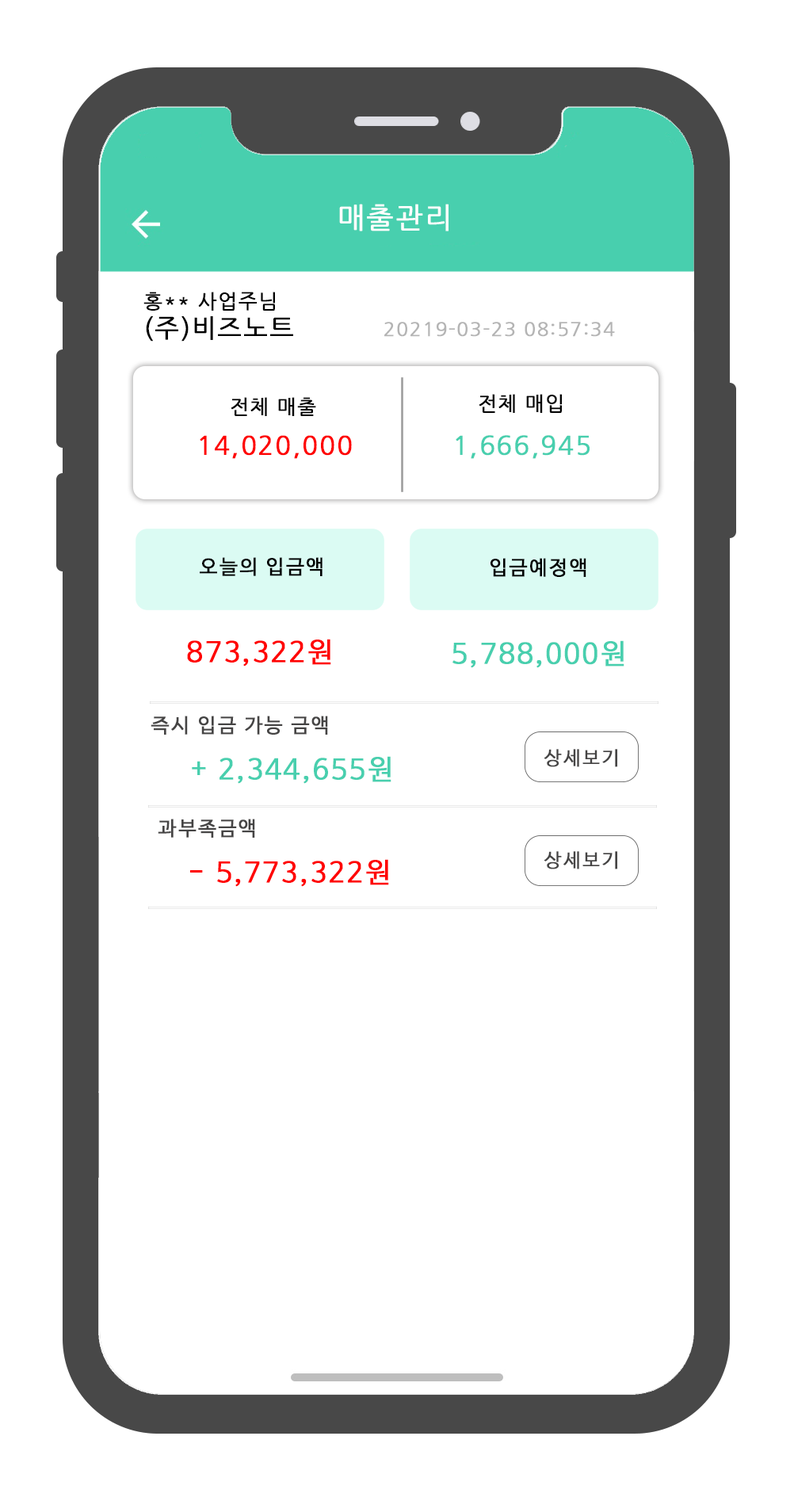
<style>
.page{position:relative;width:794px;height:1501px;background:#ffffff}
.page>*{position:absolute;margin:0}
.t1{font:28.5px "NanumGothic";letter-spacing:0.05em;color:#fefefe;font-weight:bold}
.t2{font:19.8px/28.5px "NanumGothic";letter-spacing:0.05em;color:#000000;font-weight:bold}
.t3{font:25.4px/28.5px "NanumGothic";letter-spacing:0.05em;color:#000000;font-weight:bold}
.t4{font:19px "NanumGothic";letter-spacing:0.05em;color:#b4b4b4;font-weight:bold}
.t5{font:19.8px "NanumGothic";letter-spacing:0.05em;color:#000000;font-weight:bold}
.t6{font:25.4px "NanumGothic";letter-spacing:0.05em;color:#fe0000;font-weight:bold}
.t7{font:25.4px "NanumGothic";letter-spacing:0.05em;color:#48cfae;font-weight:bold}
.t8{font:19.8px "HancomGothicRegular";letter-spacing:0.05em;color:#000000;font-weight:bold}
.t9{font:27.7px "HancomGothicRegular";letter-spacing:0.05em;color:#ff0000;font-weight:bold}
.t10{font:27.7px "HancomGothicRegular";letter-spacing:0.05em;color:#48cfae;font-weight:bold}
.t11{font:19.8px "HancomGothicRegular";letter-spacing:0.05em;color:#454444;font-weight:bold}
.t12{font:19px "HancomGothicRegular";letter-spacing:0.05em;color:#454444;font-weight:bold}
</style>
<div class="page">
<p class="t1" style="left:339px;top:204px;width:110px;height:27px">매출관리</p>
<p class="t2" style="left:143px;top:292px;width:150px;height:50px">홍** 사업주님 <br><span class="t3">(주)비즈노트</span></p>
<p class="t4" style="left:384px;top:322px;width:231px;height:15px">20219-03-23 08:57:34</p>
<p class="t5" style="left:231px;top:397px;width:85px;height:19px">전체 매출</p>
<p class="t5" style="left:479px;top:394px;width:83px;height:19px">전체 매입</p>
<p class="t6" style="left:200px;top:435px;width:152px;height:24px">14,020,000</p>
<p class="t7" style="left:456px;top:435px;width:134px;height:24px">1,666,945</p>
<p class="t8" style="left:200px;top:557px;width:123px;height:19px">오늘의 입금액</p>
<p class="t8" style="left:491px;top:558px;width:96px;height:19px">입금예정액</p>
<p class="t9" style="left:187px;top:639px;width:144px;height:28px">873,322원</p>
<p class="t10" style="left:453px;top:640px;width:172px;height:28px">5,788,000원</p>
<p class="t11" style="left:151px;top:716px;width:177px;height:19px">즉시 입금 가능 금액</p>
<p class="t12" style="left:544px;top:749px;width:73px;height:18px">상세보기</p>
<p class="t10" style="left:192px;top:756px;width:200px;height:28px">+ 2,344,655원</p>
<p class="t11" style="left:158px;top:819px;width:97px;height:19px">과부족금액</p>
<p class="t12" style="left:544px;top:851px;width:73px;height:19px">상세보기</p>
<p class="t9" style="left:190px;top:859px;width:199px;height:28px">- 5,773,322원</p>
</div>
